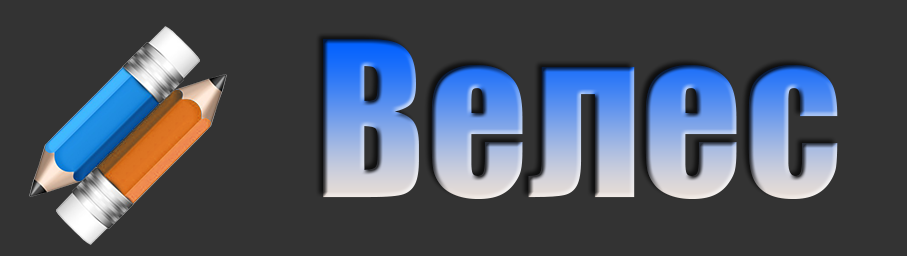
<style>
.page{position:relative;width:907px;height:256px;background:#333333}
.page>*{position:absolute;margin:0}
.t1{font:200px "Impact"}
</style>
<div class="page">
<p class="t1" style="left:323px;top:38px;width:515px;height:161px">Велес</p>
</div>
